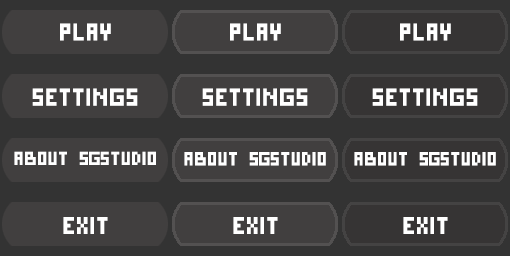
<style>
.page{position:relative;width:510px;height:256px;background:#413f3f}
.page>*{position:absolute;margin:0}
.t1{font:24px "PixelCyr-Normal";color:#ffffff}
.t2{font:18.7px "PixelCyr-Normal";color:#ffffff}
</style>
<div class="page">
<p class="t1" style="left:60px;top:23px;width:51px;height:18px">Play</p>
<p class="t1" style="left:230px;top:23px;width:51px;height:18px">Play</p>
<p class="t1" style="left:400px;top:23px;width:51px;height:18px">Play</p>
<p class="t1" style="left:32px;top:88px;width:106px;height:18px">Settings</p>
<p class="t1" style="left:202px;top:88px;width:106px;height:18px">Settings</p>
<p class="t1" style="left:372px;top:88px;width:106px;height:18px">Settings</p>
<p class="t2" style="left:14px;top:151px;width:142px;height:14px">About SGStudio</p>
<p class="t2" style="left:184px;top:152px;width:142px;height:14px">About SGStudio</p>
<p class="t2" style="left:354px;top:152px;width:142px;height:14px">About SGStudio</p>
<p class="t1" style="left:63px;top:217px;width:45px;height:17px">Exit</p>
<p class="t1" style="left:233px;top:217px;width:45px;height:17px">Exit</p>
<p class="t1" style="left:403px;top:217px;width:45px;height:17px">Exit</p>
</div>
